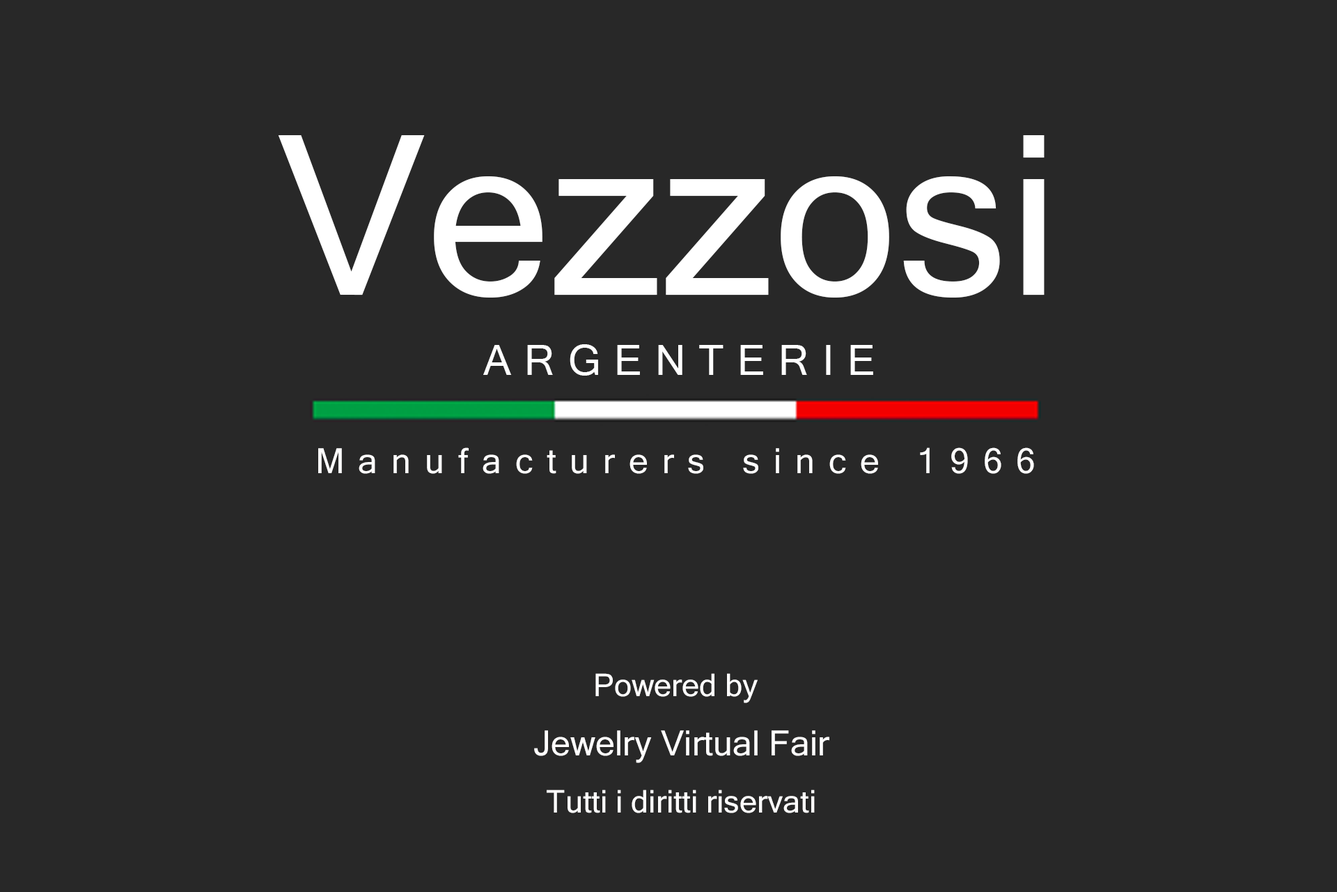
<style>
.page{position:relative;width:1337px;height:892px;background:#282828}
.page>*{position:absolute;margin:0}
.t1{font:222.9px "MicrosoftSansSerif";color:#ffffff}
.t2{font:41.8px "MicrosoftSansSerif";letter-spacing:0.32em;color:#ffffff}
.t3{font:34.8px "MicrosoftSansSerif";letter-spacing:0.4em;color:#fffefe}
.t4{font:31.3px "MicrosoftSansSerif";color:#fffefe}
.t5{font:34.8px "MicrosoftSansSerif";color:#fffefe}
</style>
<div class="page">
<p class="t1" style="left:278px;top:135px;width:767px;height:162px">Vezzosi</p>
<p class="t2" style="left:483px;top:344px;width:390px;height:31px">ARGENTERIE</p>
<p class="t3" style="left:318px;top:447px;width:716px;height:27px">Manufacturers since 1966</p>
<p class="t4" style="left:596px;top:673px;width:162px;height:30px">Powered by</p>
<p class="t5" style="left:534px;top:730px;width:296px;height:33px">Jewelry Virtual Fair</p>
<p class="t4" style="left:547px;top:789px;width:268px;height:24px">Tutti i diritti riservati</p>
</div>
